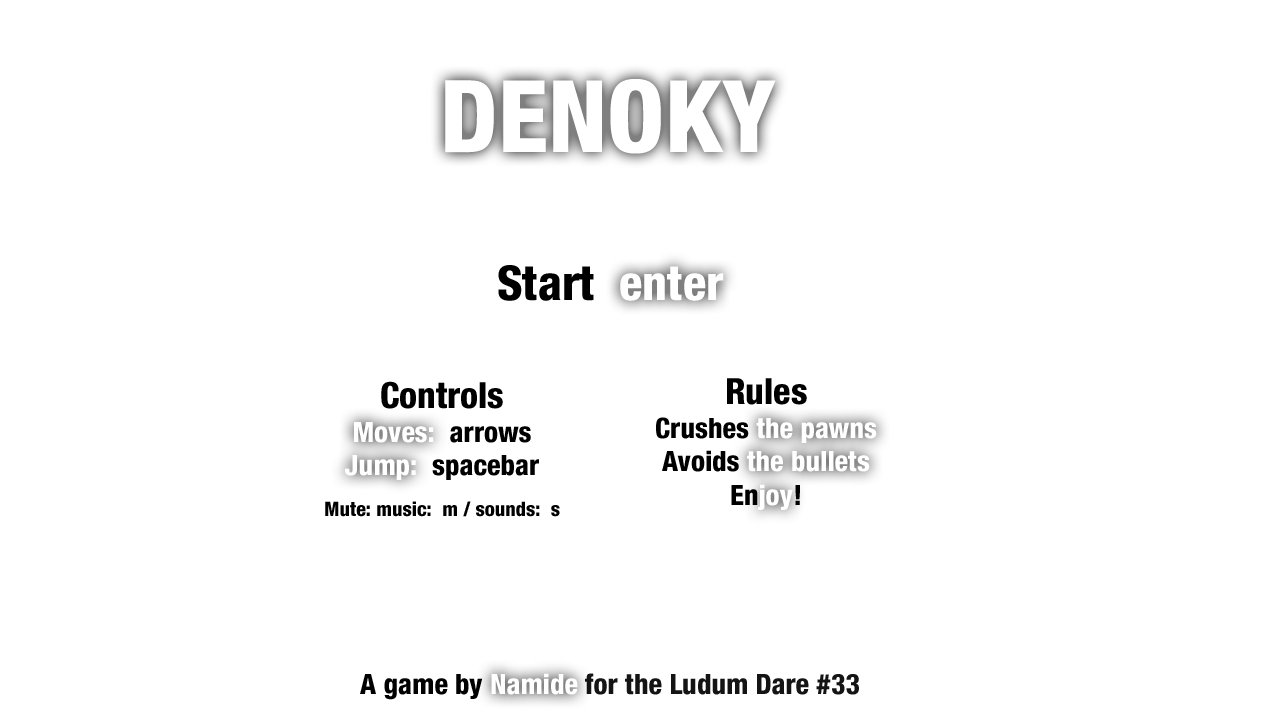
<style>
.page{position:relative;width:1280px;height:720px;background:#ffffff}
.page>*{position:absolute;margin:0}
.t1{font:100px "HelveticaNeueLTStd-HvCn";color:#ffffff;text-transform:uppercase}
.t2{font:48px "HelveticaNeueLTStd-HvCn";color:#000000}
.t3{font:48px "HelveticaNeueLTStd-HvCn";color:#ffffff}
.t4{font:20px/40px "HelveticaNeueLTStd-HvCn";color:#000000}
.t5{font:36px "HelveticaNeueLTStd-HvCn";color:#000000}
.t6{font:28px "HelveticaNeueLTStd-HvCn";color:#ffffff}
.t7{font:28px "HelveticaNeueLTStd-HvCn";color:#000000}
.t8{font:20px "HelveticaNeueLTStd-HvCn";color:#000000}
.t9{font:28px "HelveticaNeueLTStd-HvCn";color:#141414}
</style>
<div class="page">
<p class="t1" style="left:445px;top:78px;width:331px;height:76px">Denoky</p>
<p class="t1" style="left:445px;top:78px;width:331px;height:76px">Denoky</p>
<p class="t2" style="left:498px;top:265px;width:226px;height:36px">Start  <span class="t3">enter</span></p>
<p class="t2" style="left:498px;top:265px;width:226px;height:36px">Start  <span class="t3">enter</span></p>
<p class="t4" style="left:325px;top:381px;width:235px;height:136px;text-align:center"><span class="t5">Controls<br></span><span class="t6">Moves:  </span><span class="t7">arrows<br></span><span class="t6">Jump:  </span><span class="t7">spacebar<br></span>Mute: music:  m<span class="t8"> / sounds:  s</span></p>
<p class="t4" style="left:325px;top:381px;width:235px;height:136px;text-align:center"><span class="t5">Controls<br></span><span class="t6">Moves:  </span><span class="t7">arrows<br></span><span class="t6">Jump:  </span><span class="t7">spacebar<br></span>Mute: music:  m<span class="t8"> / sounds:  s</span></p>
<p class="t6" style="left:656px;top:378px;width:221px;height:132px;text-align:center"><span class="t5">Rules<br></span><span class="t7">Crushes</span> the pawns<br><span class="t7">Avoids</span> the bullets<br><span class="t7">En</span>joy<span class="t7">!</span></p>
<p class="t6" style="left:656px;top:378px;width:221px;height:132px;text-align:center"><span class="t5">Rules<br></span><span class="t7">Crushes</span> the pawns<br><span class="t7">Avoids</span> the bullets<br><span class="t7">En</span>joy<span class="t7">!</span></p>
<p class="t9" style="left:360px;top:673px;width:499px;height:27px"><span class="t7">A game by</span><span class="t6"> Namide </span>for the Ludum Dare #33</p>
<p class="t9" style="left:360px;top:673px;width:499px;height:27px"><span class="t7">A game by</span><span class="t6"> Namide </span>for the Ludum Dare #33</p>
</div>
